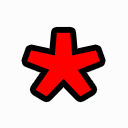
<style>
.page{position:relative;width:128px;height:128px;background:#fcfcfc}
.page>*{position:absolute;margin:0}
.t1{font:129.9px "SourceCodePro-Black";color:#ff0000;scale:1.14 1}
</style>
<div class="page">
<p class="t1" style="left:27px;top:32px;width:73px;height:65px">*</p>
</div>
